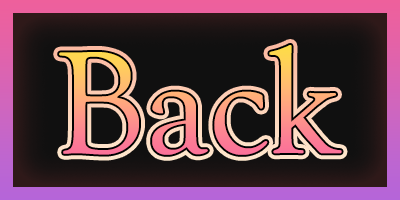
<style>
.page{position:relative;width:400px;height:200px}
.page>*{position:absolute;margin:0}
.t1{font:150px "GoudyOldStyleT-Regular"}
</style>
<div class="page">
<p class="t1" style="left:59px;top:45px;width:283px;height:110px">Back</p>
</div>
